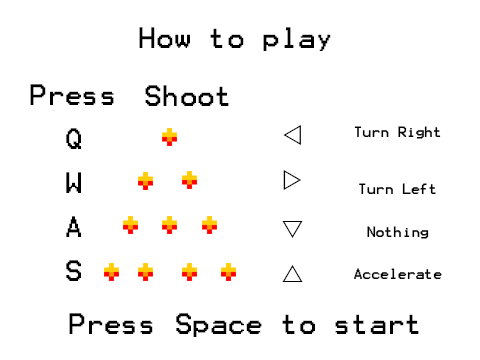
<style>
.page{position:relative;width:480px;height:360px;background:#ffffff}
.page>*{position:absolute;margin:0}
.t1{font:23.6px "Terminal";color:#000000}
.t2{font:11.8px "Terminal";color:#000000}
</style>
<div class="page">
<p class="t1" style="left:139px;top:27px;width:192px;height:24px">How to play</p>
<p class="t1" style="left:30px;top:84px;width:84px;height:21px">Press</p>
<p class="t1" style="left:145px;top:85px;width:84px;height:21px">Shoot</p>
<p class="t2" style="left:354px;top:126px;width:88px;height:153px;text-align:center">Turn Right<br><br><br><br>Turn Left<br><br><br>Nothing<br><br><br>Accelerate</p>
<p class="t1" style="left:66px;top:128px;width:15px;height:21px">Q</p>
<p class="t1" style="left:66px;top:172px;width:15px;height:21px">W</p>
<p class="t1" style="left:66px;top:216px;width:15px;height:21px">A</p>
<p class="t1" style="left:66px;top:260px;width:15px;height:21px">S</p>
<p class="t1" style="left:69px;top:313px;width:350px;height:24px">Press Space to start</p>
</div>
